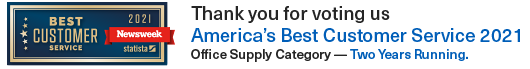
<style>
.page{position:relative;width:530px;height:69px;background:#ffffff}
.page>*{position:absolute;margin:0}
.t1{font:18.6px/21.3px "NeueHaasUnicaW1G-Medium";color:#005eb8}
.t2{font:18.6px/21.3px "NeueHaasUnicaW1G-Medium";color:#252525}
.t3{font:13.3px/17.3px "NeueHaasUnicaW1G-Medium";color:#252525}
.t4{font:13.3px/17.3px "NeueHaasUnicaW1G-Medium";color:#005eb8}
</style>
<div class="page">
<p class="t1" style="left:191px;top:6px;width:329px;height:56px"><span class="t2">Thank you for voting us<br></span>America’s Best Customer Service 2021<br><span class="t3">Office Supply Category — </span><span class="t4">Two Years Running.</span></p>
</div>
